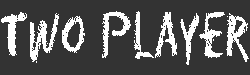
<style>
.page{position:relative;width:250px;height:75px;background:#333333}
.page>*{position:absolute;margin:0}
.t1{font:58.1px "Eraser-Regular";color:#ffffff;scale:0.67 1}
</style>
<div class="page">
<p class="t1" style="left:1px;top:11px;width:248px;height:54px">Two Player</p>
</div>
